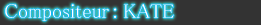
<style>
.page{position:relative;width:261px;height:25px;background:#333333}
.page>*{position:absolute;margin:0}
.t1{font:20px "MS-PMincho";color:#ffffff}
.t2{font:20px "MS-PMincho";letter-spacing:-0.05em;color:#ffffff}
</style>
<div class="page">
<p class="t1" style="left:5px;top:4px;width:169px;height:17px">Compositeur <span class="t2">:</span> KATE</p>
</div>
